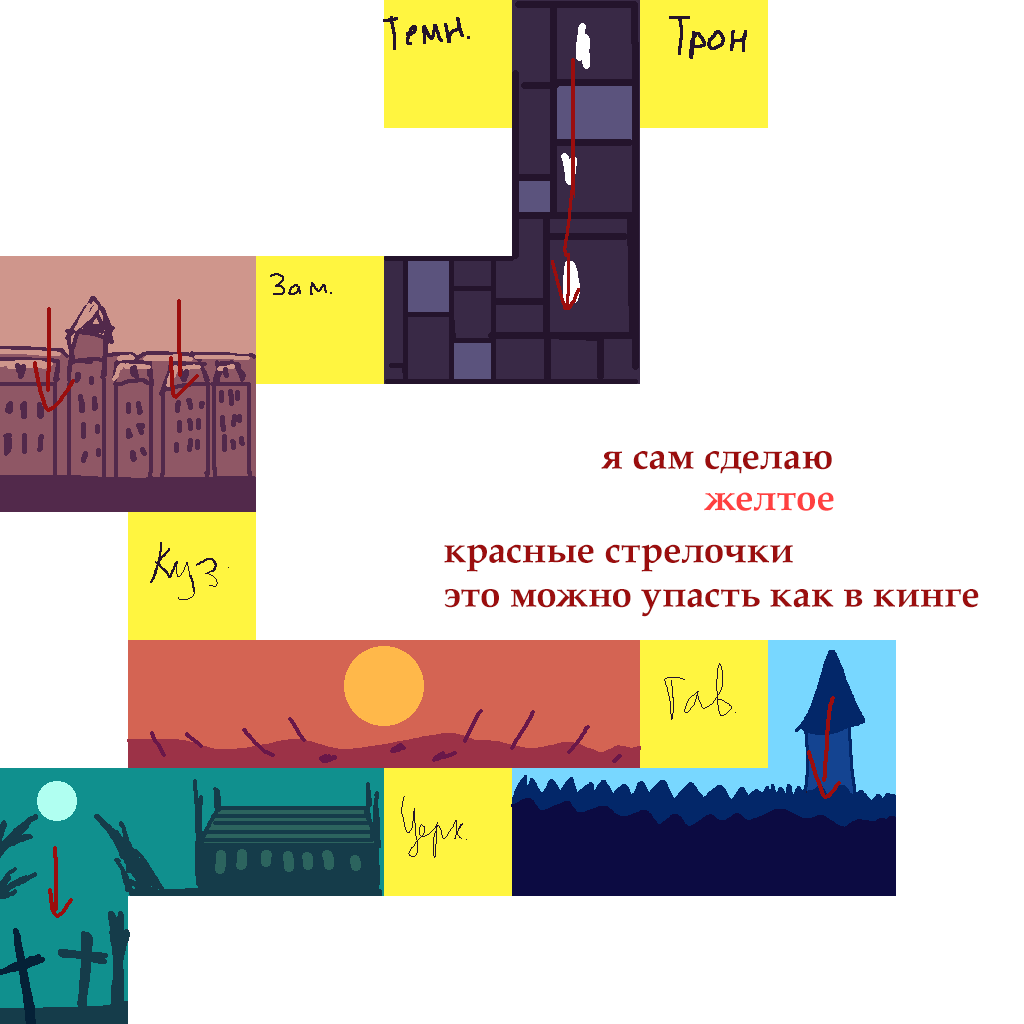
<style>
.page{position:relative;width:1024px;height:1024px;background:#ffffff}
.page>*{position:absolute;margin:0}
.t1{font:37px "BookAntiqua-Bold";color:#9b0e0e}
.t2{font:37px "BookAntiqua-Bold";color:#ff4040}
</style>
<div class="page">
<p class="t1" style="left:601px;top:451px;width:231px;height:23px">я сам сделаю</p>
<p class="t2" style="left:704px;top:492px;width:130px;height:19px">желтое</p>
<p class="t1" style="left:444px;top:544px;width:535px;height:73px">красные стрелочки<br>это можно упасть как в кинге</p>
</div>
